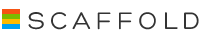
<style>
.page{position:relative;width:200px;height:40px;background:#ffffff}
.page>*{position:absolute;margin:0}
.t1{font:26px "Hero";letter-spacing:0.2em;color:#333333}
</style>
<div class="page">
<p class="t1" style="left:28px;top:12px;width:171px;height:18px">SCAFFOLD</p>
</div>
